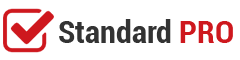
<style>
.page{position:relative;width:240px;height:60px;background:#ffffff}
.page>*{position:absolute;margin:0}
.t1{font:32px "Roboto-BoldCondensed";color:#333333}
.t2{font:32px "Roboto-BoldCondensed";color:#ce181e}
</style>
<div class="page">
<p class="t1" style="left:59px;top:19px;width:174px;height:24px">Standard <span class="t2">PRO</span></p>
</div>
